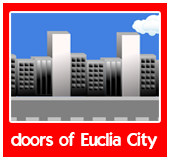
<style>
.page{position:relative;width:170px;height:160px;background:#ff0000}
.page>*{position:absolute;margin:0}
.t1{font:18px "ELEGANCE";color:#ffffff}
</style>
<div class="page">
<p class="t1" style="left:11px;top:132px;width:147px;height:17px">doors of Euclia City</p>
</div>
